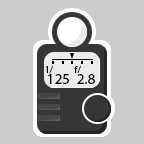
<style>
.page{position:relative;width:144px;height:144px;background:#cccccc}
.page>*{position:absolute;margin:0}
.t1{font:9.7px "MyriadPro-Regular";color:#000000}
.t2{font:15.2px "MyriadPro-Regular";color:#000000}
</style>
<div class="page">
<p class="t1" style="left:45px;top:66px;width:8px;height:8px">1/</p>
<p class="t2" style="left:48px;top:74px;width:21px;height:10px">125</p>
<p class="t1" style="left:74px;top:66px;width:7px;height:8px">f/</p>
<p class="t2" style="left:77px;top:74px;width:18px;height:10px">2.8</p>
</div>
